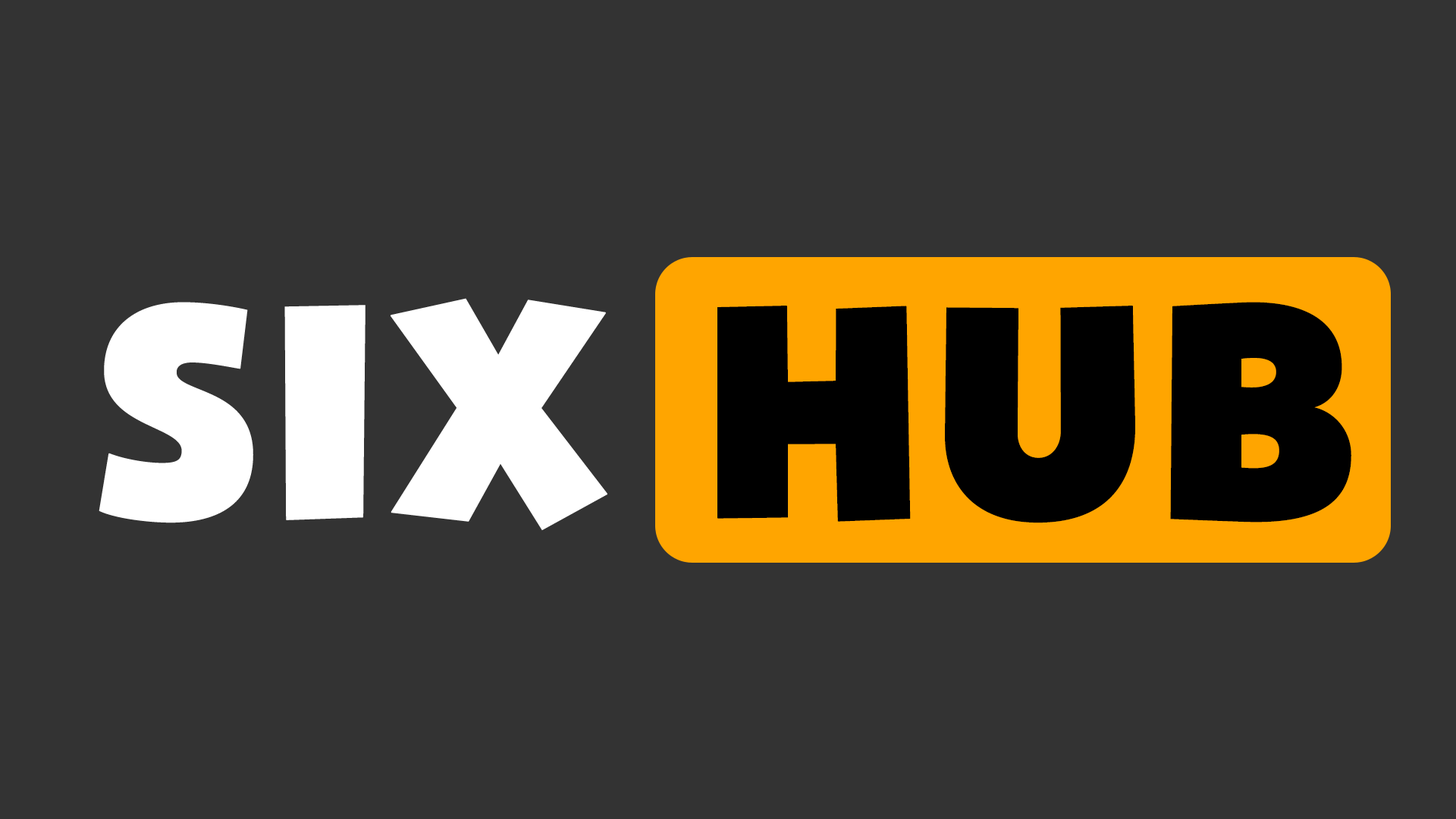
<style>
.page{position:relative;width:1456px;height:819px;background:#333333}
.page>*{position:absolute;margin:0}
.t1{font:303.3px "SVN-Bango";color:#ffffff;font-weight:bold}
.t2{font:303.3px "SVN-Bango";color:#000000;font-weight:bold}
</style>
<div class="page">
<p class="t1" style="left:99px;top:298px;width:1252px;height:233px">SIX <span class="t2">HUB</span></p>
</div>
